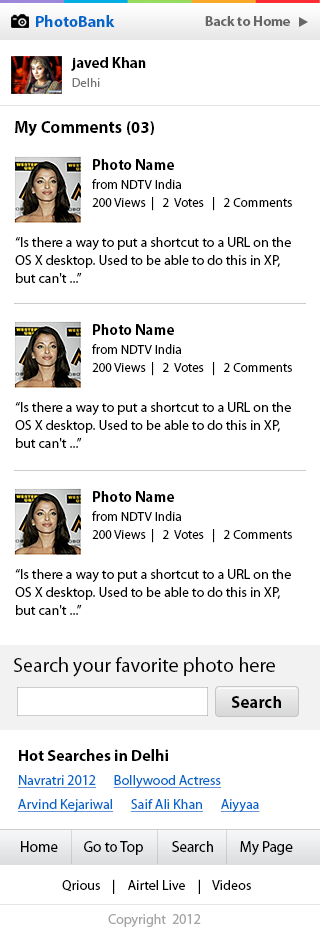
<style>
.page{position:relative;width:320px;height:937px;background:#ffffff}
.page>*{position:absolute;margin:0}
.t1{font:16px "MyriadPro-Bold";color:#0066cc}
.t2{font:14px "MyriadPro-Bold";color:#666666}
.t3{font:15px "MyriadPro-Bold";color:#000000}
.t4{font:12px "MyriadPro-Regular";letter-spacing:0.04em;color:#737373}
.t5{font:17px "MyriadPro-Bold";color:#000000}
.t6{font:13px/18px "MyriadPro-Regular";color:#000000}
.t7{font:14px/18px "MyriadPro-Regular";color:#000000}
.t8{font:20px "MyriadPro-Regular";color:#000000}
.t9{font:16px "MyriadPro-Bold";color:#000000}
.t10{font:14px/24px "MyriadPro-Regular";color:#0066cc;text-decoration:underline}
.t11{font:15px "MyriadPro-Regular";color:#000000}
.t12{font:14px "MyriadPro-Regular";color:#000000}
.t13{font:14px "MyriadPro-Regular";color:#a3a3a3}
</style>
<div class="page">
<p class="t1" style="left:36px;top:15px;width:79px;height:12px">PhotoBank</p>
<p class="t2" style="left:205px;top:16px;width:85px;height:10px">Back to Home</p>
<p class="t3" style="left:71px;top:57px;width:75px;height:14px">javed Khan</p>
<p class="t4" style="left:72px;top:78px;width:28px;height:9px">Delhi</p>
<p class="t5" style="left:15px;top:121px;width:139px;height:15px">My Comments (03)</p>
<p class="t3" style="left:93px;top:159px;width:81px;height:11px">Photo Name</p>
<p class="t6" style="left:92px;top:179px;width:200px;height:32px">from NDTV India<br>200 Views  |   2  Votes   |   2 Comments</p>
<p class="t7" style="left:15px;top:237px;width:276px;height:46px">“Is there a way to put a shortcut to a URL on the OS X desktop. Used to be able to do this in XP, but can't ...”</p>
<p class="t3" style="left:93px;top:324px;width:81px;height:11px">Photo Name</p>
<p class="t6" style="left:92px;top:344px;width:200px;height:32px">from NDTV India<br>200 Views  |   2  Votes   |   2 Comments</p>
<p class="t7" style="left:15px;top:402px;width:276px;height:46px">“Is there a way to put a shortcut to a URL on the OS X desktop. Used to be able to do this in XP, but can't ...”</p>
<p class="t3" style="left:93px;top:491px;width:81px;height:11px">Photo Name</p>
<p class="t6" style="left:92px;top:511px;width:200px;height:32px">from NDTV India<br>200 Views  |   2  Votes   |   2 Comments</p>
<p class="t7" style="left:15px;top:569px;width:276px;height:46px">“Is there a way to put a shortcut to a URL on the OS X desktop. Used to be able to do this in XP, but can't ...”</p>
<p class="t8" style="left:14px;top:657px;width:261px;height:20px">Search your favorite photo here</p>
<p class="t5" style="left:231px;top:696px;width:50px;height:12px">Search</p>
<p class="t9" style="left:19px;top:749px;width:149px;height:12px">Hot Searches in Delhi</p>
<p class="t10" style="left:18px;top:775px;width:242px;height:37px">Navratri 2012      Bollywood Actress     <br>Arvind Kejariwal      Saif Ali Khan      Aiyyaa</p>
<p class="t11" style="left:21px;top:841px;width:272px;height:14px">Home        Go to Top         Search        My Page</p>
<p class="t12" style="left:62px;top:879px;width:189px;height:15px">Qrious    |    Airtel Live    |    Videos</p>
<p class="t13" style="left:108px;top:914px;width:93px;height:13px">Copyright  2012</p>
</div>
